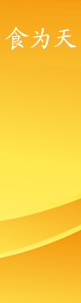
<style>
.page{position:relative;width:81px;height:303px}
.page>*{position:absolute;margin:0}
.t1{font:24px "KaiTi_GB2312";color:#fcfcf8}
</style>
<div class="page">
<p class="t1" style="left:5px;top:26px;width:72px;height:24px">食为天</p>
</div>
